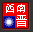
<style>
.page{position:relative;width:33px;height:32px;background:#f20000}
.page>*{position:absolute;margin:0}
.t1{font:10.4px "SimSun";color:#ffffff}
.t2{font:11.7px "SimSun";color:#ffffff}
</style>
<div class="page">
<p class="t1" style="left:6px;top:4px;width:19px;height:9px">西南</p>
<p class="t2" style="left:16px;top:15px;width:11px;height:12px">晋</p>
</div>
